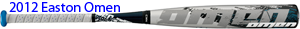
<style>
.page{position:relative;width:300px;height:29px;background:#ffffff}
.page>*{position:absolute;margin:0}
.t1{font:14px "MyriadPro-Regular";color:#0000ff}
</style>
<div class="page">
<p class="t1" style="left:9px;top:2px;width:111px;height:10px">2012 Easton Omen</p>
</div>
